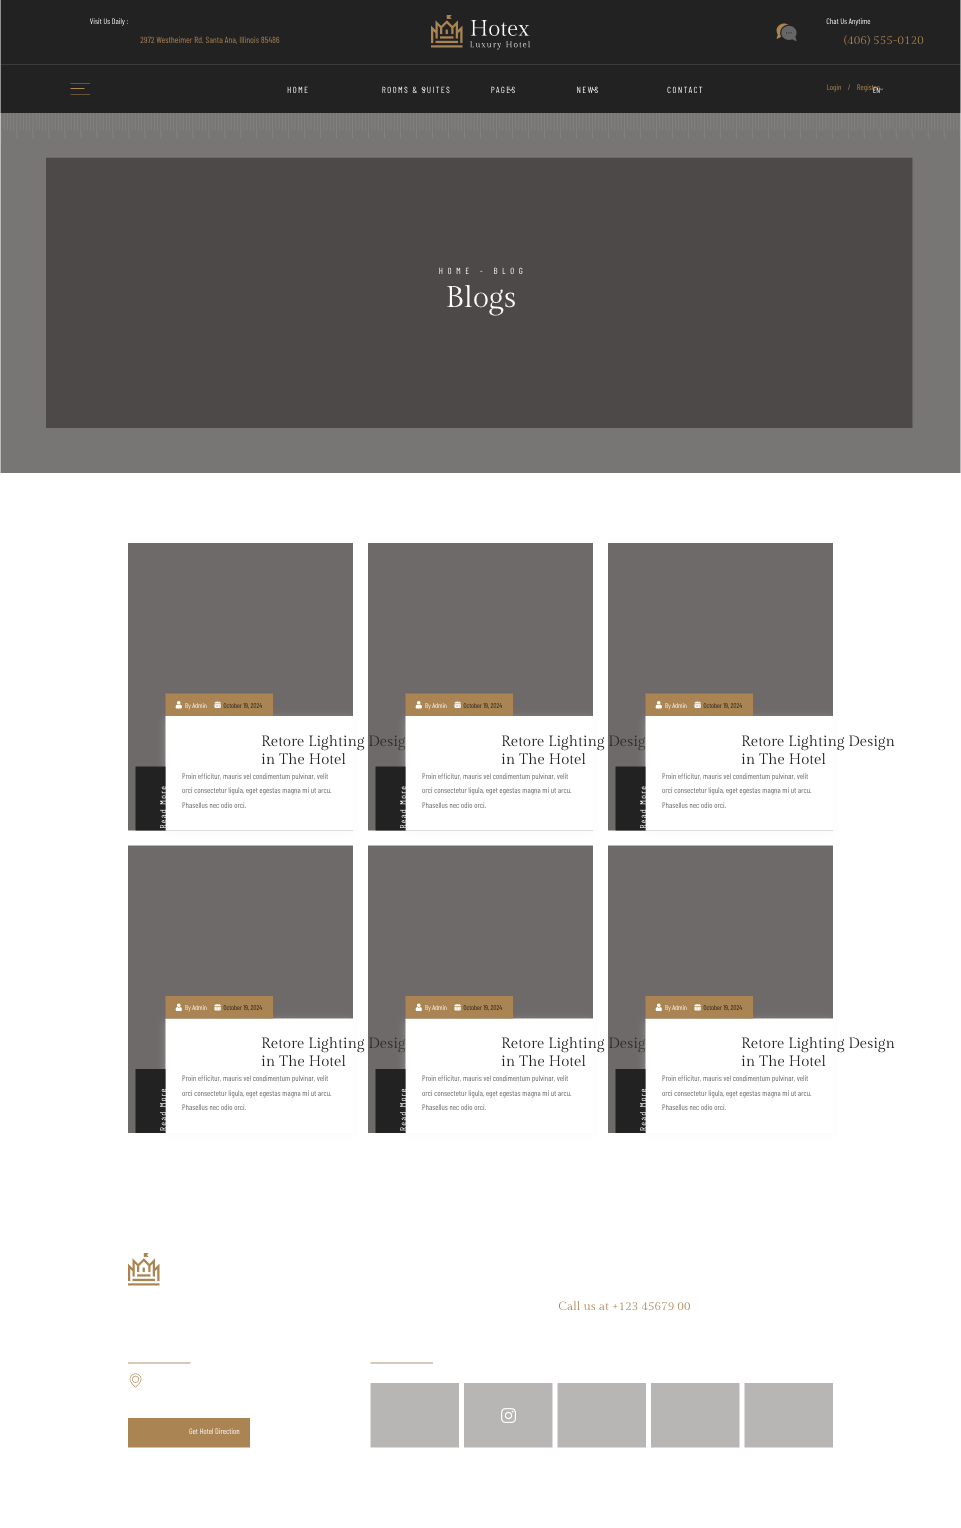
<style>
.page{position:relative;width:961px;height:1528px;background:#ffffff}
.page>*{position:absolute;margin:0}
.t1{font:8px "BarlowCondensed-Regular"}
.t2{font:9px "BarlowCondensed-Regular";color:#aa8453}
.t3{font:12px "GildaDisplay-Regular";color:#aa8453}
.t4{font:9px "BarlowCondensed-Regular";letter-spacing:0.15em;text-transform:uppercase}
.t5{font:9px "BarlowCondensed-Regular";letter-spacing:0.5em;text-transform:uppercase}
.t6{font:30px "GildaDisplay-Regular";color:#ffffff}
.t7{font:7px "BarlowCondensed-Regular"}
.t8{font:15px "GildaDisplay-Regular";color:#222222}
.t9{font:8px/14.5px "BarlowCondensed-Regular"}
.t10{font:9px "BarlowCondensed-Regular";letter-spacing:0.15em;color:#ffffff}
.t11{font:9px "BarlowCondensed-Regular";letter-spacing:0.15em}
</style>
<div class="page">
<p class="t1" style="left:90px;top:18px;width:38px;height:8px">Visit Us Daily :</p>
<p class="t1" style="left:826px;top:18px;width:45px;height:8px">Chat Us Anytime</p>
<p class="t2" style="left:140px;top:36px;width:140px;height:8px">2972 Westheimer Rd. Santa Ana, Illinois 85486</p>
<p class="t3" style="left:844px;top:35px;width:80px;height:11px">(406) 555-0120</p>
<p class="t4" style="left:287px;top:86px;width:21px;height:8px">Home</p>
<p class="t4" style="left:382px;top:86px;width:68px;height:8px">Rooms &amp; Suites</p>
<p class="t4" style="left:491px;top:86px;width:24px;height:8px">Pages</p>
<p class="t4" style="left:577px;top:86px;width:21px;height:8px">News</p>
<p class="t4" style="left:667px;top:86px;width:36px;height:8px">Contact</p>
<p class="t1" style="left:827px;top:84px;width:53px;height:8px">Login    /    Register</p>
<p class="t1" style="left:873px;top:87px;width:7px;height:6px">EN</p>
<p class="t5" style="left:439px;top:267px;width:84px;height:8px">Home - Blog</p>
<p class="t6" style="left:446px;top:284px;width:69px;height:32px">Blogs</p>
<p class="t7" style="left:185px;top:703px;width:22px;height:7px">By Admin</p>
<p class="t7" style="left:223px;top:703px;width:39px;height:6px">October 19, 2024</p>
<p class="t7" style="left:425px;top:703px;width:22px;height:7px">By Admin</p>
<p class="t7" style="left:463px;top:703px;width:39px;height:6px">October 19, 2024</p>
<p class="t7" style="left:665px;top:703px;width:22px;height:7px">By Admin</p>
<p class="t7" style="left:703px;top:703px;width:39px;height:6px">October 19, 2024</p>
<p class="t8" style="left:261px;top:734px;width:154px;height:31px">Retore Lighting Design <br>in The Hotel</p>
<p class="t8" style="left:501px;top:734px;width:154px;height:31px">Retore Lighting Design <br>in The Hotel</p>
<p class="t8" style="left:741px;top:734px;width:154px;height:31px">Retore Lighting Design <br>in The Hotel</p>
<p class="t9" style="left:182px;top:773px;width:150px;height:36px">Proin efficitur, mauris vel condimentum pulvinar, velit orci consectetur ligula, eget egestas magna mi ut arcu. Phasellus nec odio orci.</p>
<p class="t9" style="left:422px;top:773px;width:150px;height:36px">Proin efficitur, mauris vel condimentum pulvinar, velit orci consectetur ligula, eget egestas magna mi ut arcu. Phasellus nec odio orci.</p>
<p class="t9" style="left:662px;top:773px;width:150px;height:36px">Proin efficitur, mauris vel condimentum pulvinar, velit orci consectetur ligula, eget egestas magna mi ut arcu. Phasellus nec odio orci.</p>
<p class="t10" style="left:159px;top:786px;width:8px;height:42px;rotate:-90deg">Read More</p>
<p class="t10" style="left:399px;top:786px;width:8px;height:42px;rotate:-90deg">Read More</p>
<p class="t10" style="left:639px;top:786px;width:8px;height:42px;rotate:-90deg">Read More</p>
<p class="t7" style="left:185px;top:1005px;width:22px;height:7px">By Admin</p>
<p class="t7" style="left:223px;top:1005px;width:39px;height:6px">October 19, 2024</p>
<p class="t7" style="left:425px;top:1005px;width:22px;height:7px">By Admin</p>
<p class="t7" style="left:463px;top:1005px;width:39px;height:6px">October 19, 2024</p>
<p class="t7" style="left:665px;top:1005px;width:22px;height:7px">By Admin</p>
<p class="t7" style="left:703px;top:1005px;width:39px;height:6px">October 19, 2024</p>
<p class="t8" style="left:261px;top:1036px;width:154px;height:31px">Retore Lighting Design <br>in The Hotel</p>
<p class="t8" style="left:501px;top:1036px;width:154px;height:31px">Retore Lighting Design <br>in The Hotel</p>
<p class="t8" style="left:741px;top:1036px;width:154px;height:31px">Retore Lighting Design <br>in The Hotel</p>
<p class="t9" style="left:182px;top:1075px;width:150px;height:36px">Proin efficitur, mauris vel condimentum pulvinar, velit orci consectetur ligula, eget egestas magna mi ut arcu. Phasellus nec odio orci.</p>
<p class="t9" style="left:422px;top:1075px;width:150px;height:36px">Proin efficitur, mauris vel condimentum pulvinar, velit orci consectetur ligula, eget egestas magna mi ut arcu. Phasellus nec odio orci.</p>
<p class="t9" style="left:662px;top:1075px;width:150px;height:36px">Proin efficitur, mauris vel condimentum pulvinar, velit orci consectetur ligula, eget egestas magna mi ut arcu. Phasellus nec odio orci.</p>
<p class="t11" style="left:159px;top:1088px;width:8px;height:43px;rotate:-90deg">Read More</p>
<p class="t11" style="left:399px;top:1088px;width:8px;height:43px;rotate:-90deg">Read More</p>
<p class="t11" style="left:639px;top:1088px;width:8px;height:43px;rotate:-90deg">Read More</p>
<p class="t3" style="left:558px;top:1301px;width:132px;height:10px">Call us at +123 45679 00</p>
<p class="t1" style="left:189px;top:1428px;width:51px;height:7px">Get Hotel Direction</p>
</div>
